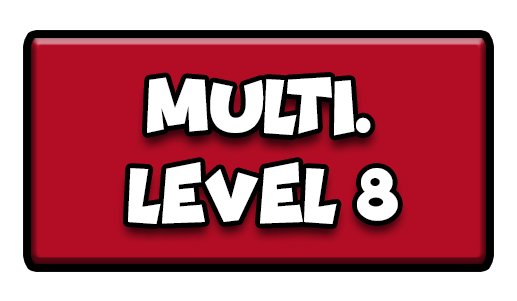
<style>
.page{position:relative;width:517px;height:301px;background:#ffffff}
.page>*{position:absolute;margin:0}
.t1{font:77.7px "Funhouse";color:#ffffff;scale:0.95 1}
</style>
<div class="page">
<p class="t1" style="left:147px;top:77px;width:224px;height:59px">MULTI.</p>
<p class="t1" style="left:128px;top:162px;width:270px;height:62px">LEVEL 8</p>
</div>
